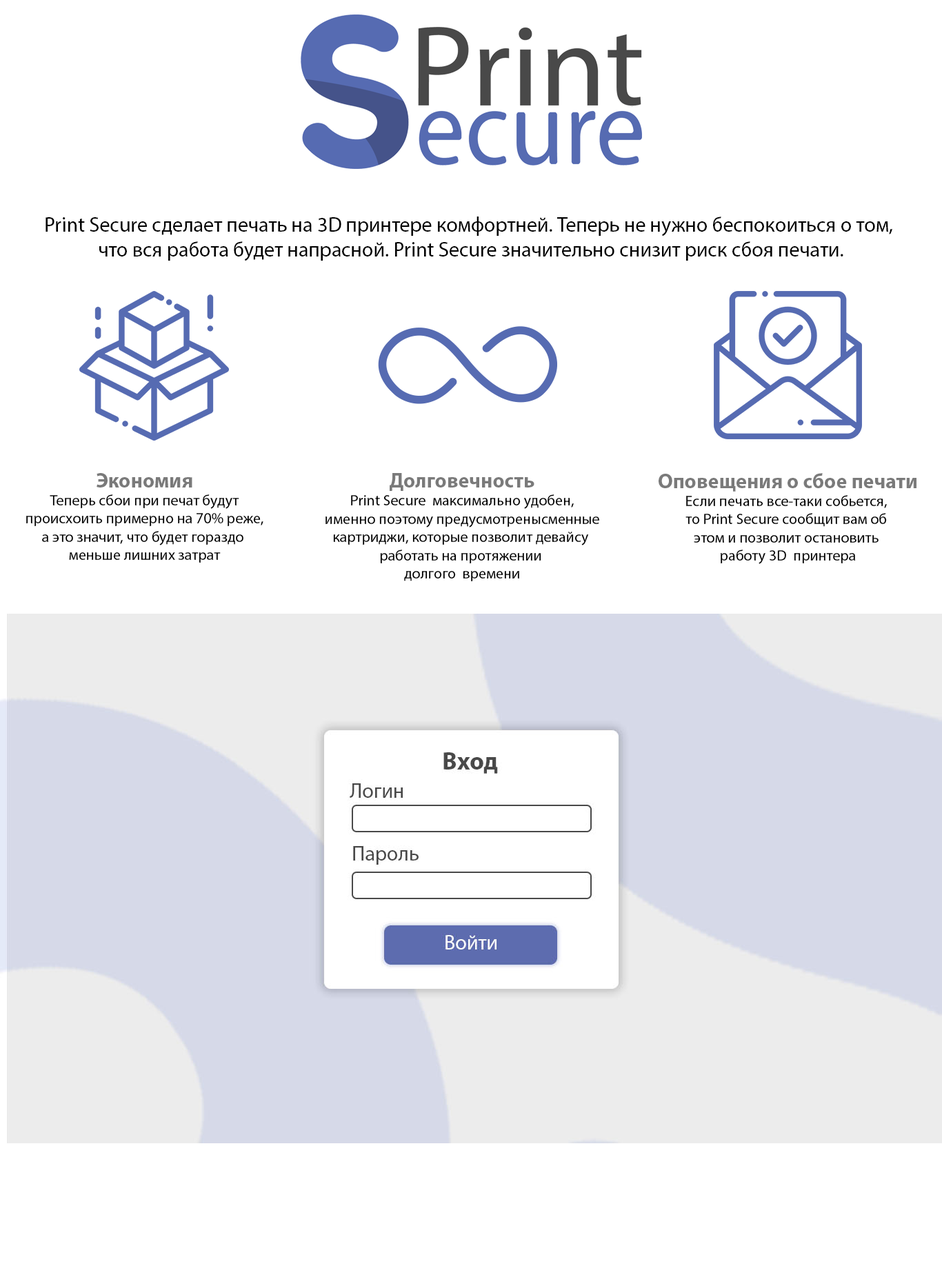
<style>
.page{position:relative;width:942px;height:1266px;background:#ffffff}
.page>*{position:absolute;margin:0}
.t1{font:20.7px "MyriadPro-Regular";color:#000000}
.t2{font:15.2px "MyriadPro-Regular";color:#000000}
.t3{font:20.7px "MyriadPro-Bold";color:#7a7a7a}
</style>
<div class="page">
<p class="t1" style="left:46px;top:217px;width:846px;height:44px;text-align:center">Print Secure сделает печать на 3D принтере комфортней. Теперь не нужно беспокоиться о том, <br>что вся работа будет напрасной. Print Secure значительно снизит риск сбоя печати.</p>
<p class="t2" style="left:26px;top:473px;width:237px;height:90px;text-align:center"><span class="t3">Экономия<br></span>Теперь сбои при печат будут<br> происхоить примерно на 70% реже, <br>а это значит, что будет гораздо <br>меньше лишних затрат</p>
<p class="t2" style="left:325px;top:473px;width:274px;height:108px;text-align:center"><span class="t3">Долговечность<br></span>Print Secure  максимально удобен,<br> именно поэтому предусмотренысменные <br>картриджи, которые позволит девайсу <br> работать на протяжении  <br>долгого  времени</p>
<p class="t2" style="left:659px;top:473px;width:257px;height:91px;text-align:center"><span class="t3">Оповещения о сбое печати<br></span>Если печать все-таки собьется, <br>то Print Secure сообщит вам об <br>этом и позволит остановить <br>работу 3D  принтера</p>
</div>
